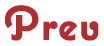
<style>
.page{position:relative;width:104px;height:46px;background:#ffffff}
.page>*{position:absolute;margin:0}
.t1{font:48px "CoquetteBold";color:#b22d2d}
</style>
<div class="page">
<p class="t1" style="left:5px;top:5px;width:94px;height:36px">Prev</p>
</div>
